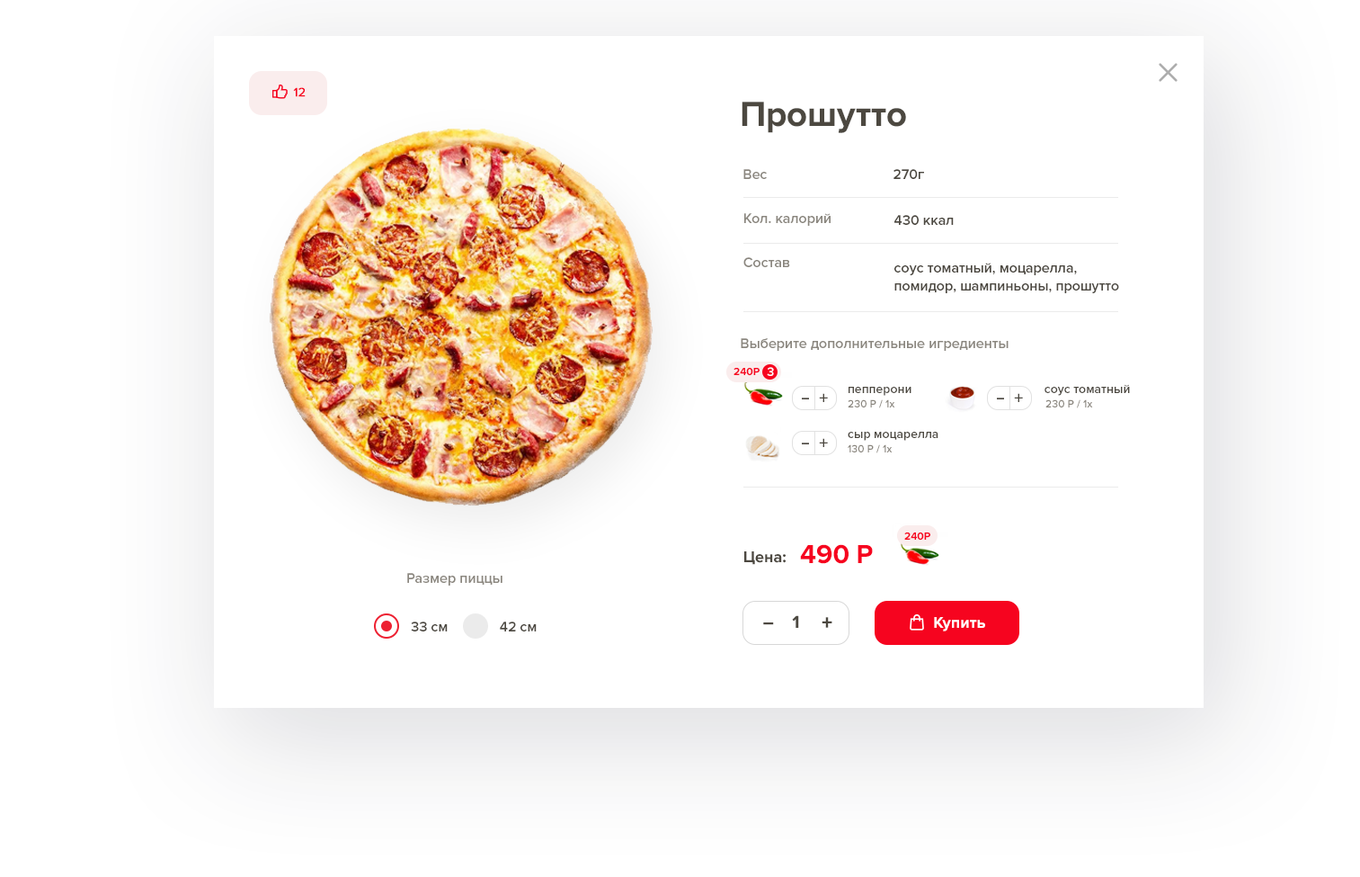
<style>
.page{position:relative;width:1360px;height:877px;background:#ffffff}
.page>*{position:absolute;margin:0}
.t1{font:12.6px "ProximaNova-Regular";color:#f6041f;font-weight:bold}
.t2{font:36px "ProximaNova-Bold";color:#4c4840}
.t3{font:14.4px "ProximaNova-Semibold";color:#8a867e}
.t4{font:14.4px "ProximaNova-Semibold";color:#4c4840}
.t5{font:14.4px/18px "ProximaNova-Semibold";color:#4c4840}
.t6{font:10.8px "ProximaNova-Bold";color:#f6041f}
.t7{font:12.6px "ProximaNova-Semibold";color:#ffffff}
.t8{font:12.6px "ProximaNova-Semibold";color:#4c4840}
.t9{font:18px "ProximaNova-Semibold";color:#4c4840;scale:1.68 1}
.t10{font:18px "ProximaNova-Semibold";color:#4c4840}
.t11{font:10.8px "ProximaNova-Semibold";color:#8a867e}
.t12{font:27px "ProximaNova-Bold";color:#f6041f}
.t13{font:16.2px "ProximaNova-Bold";color:#4c4840}
.t14{font:18px "ProximaNova-Bold";color:#4c4840}
.t15{font:21.6px "ProximaNova-Extrabld";color:#4c4840}
.t16{font:16.2px "ProximaNova-Bold";color:#ffffff}
.t17{font:21.6px "ProximaNova-Extrabld";color:#4c4840;scale:0.8 1}
</style>
<div class="page">
<p class="t1" style="left:293px;top:87px;width:13px;height:10px">12</p>
<p class="t2" style="left:742px;top:102px;width:164px;height:31px">Прошутто</p>
<p class="t3" style="left:744px;top:169px;width:23px;height:10px">Вес</p>
<p class="t4" style="left:894px;top:169px;width:30px;height:10px">270г</p>
<p class="t3" style="left:744px;top:213px;width:87px;height:13px">Кол. калорий</p>
<p class="t4" style="left:895px;top:215px;width:59px;height:10px">430 ккал</p>
<p class="t3" style="left:744px;top:257px;width:46px;height:10px">Состав</p>
<p class="t5" style="left:895px;top:263px;width:224px;height:30px">соус томатный, моцарелла, помидор, шампиньоны, прошутто</p>
<p class="t3" style="left:741px;top:338px;width:268px;height:13px">Выберите дополнительные игредиенты</p>
<p class="t6" style="left:734px;top:368px;width:26px;height:8px">240Р</p>
<p class="t7" style="left:767px;top:367px;width:7px;height:9px">3</p>
<p class="t8" style="left:849px;top:387px;width:63px;height:9px">пепперони</p>
<p class="t8" style="left:1045px;top:384px;width:85px;height:12px">соус томатный</p>
<p class="t9" style="left:802px;top:397px;width:7px;height:2px">-</p>
<p class="t10" style="left:819px;top:393px;width:9px;height:9px">+</p>
<p class="t11" style="left:848px;top:399px;width:47px;height:9px">230 Р / 1х</p>
<p class="t9" style="left:997px;top:397px;width:7px;height:2px">-</p>
<p class="t10" style="left:1014px;top:393px;width:9px;height:9px">+</p>
<p class="t11" style="left:1046px;top:399px;width:47px;height:9px">230 Р / 1х</p>
<p class="t10" style="left:819px;top:438px;width:9px;height:9px">+</p>
<p class="t8" style="left:848px;top:432px;width:91px;height:9px">сыр моцарелла</p>
<p class="t9" style="left:802px;top:442px;width:7px;height:2px">-</p>
<p class="t11" style="left:848px;top:444px;width:45px;height:9px">130 Р / 1х</p>
<p class="t6" style="left:904px;top:532px;width:27px;height:8px">240Р</p>
<p class="t12" style="left:800px;top:544px;width:73px;height:20px">490 P</p>
<p class="t13" style="left:744px;top:551px;width:42px;height:14px">Цена:</p>
<p class="t3" style="left:407px;top:573px;width:96px;height:12px">Размер пиццы</p>
<p class="t14" style="left:792px;top:615px;width:7px;height:13px">1</p>
<p class="t15" style="left:822px;top:617px;width:11px;height:11px">+</p>
<p class="t16" style="left:934px;top:617px;width:51px;height:14px">Купить</p>
<p class="t4" style="left:411px;top:621px;width:37px;height:10px">33 см</p>
<p class="t4" style="left:500px;top:621px;width:37px;height:10px">42 см</p>
<p class="t17" style="left:763px;top:622px;width:11px;height:3px">_</p>
</div>
